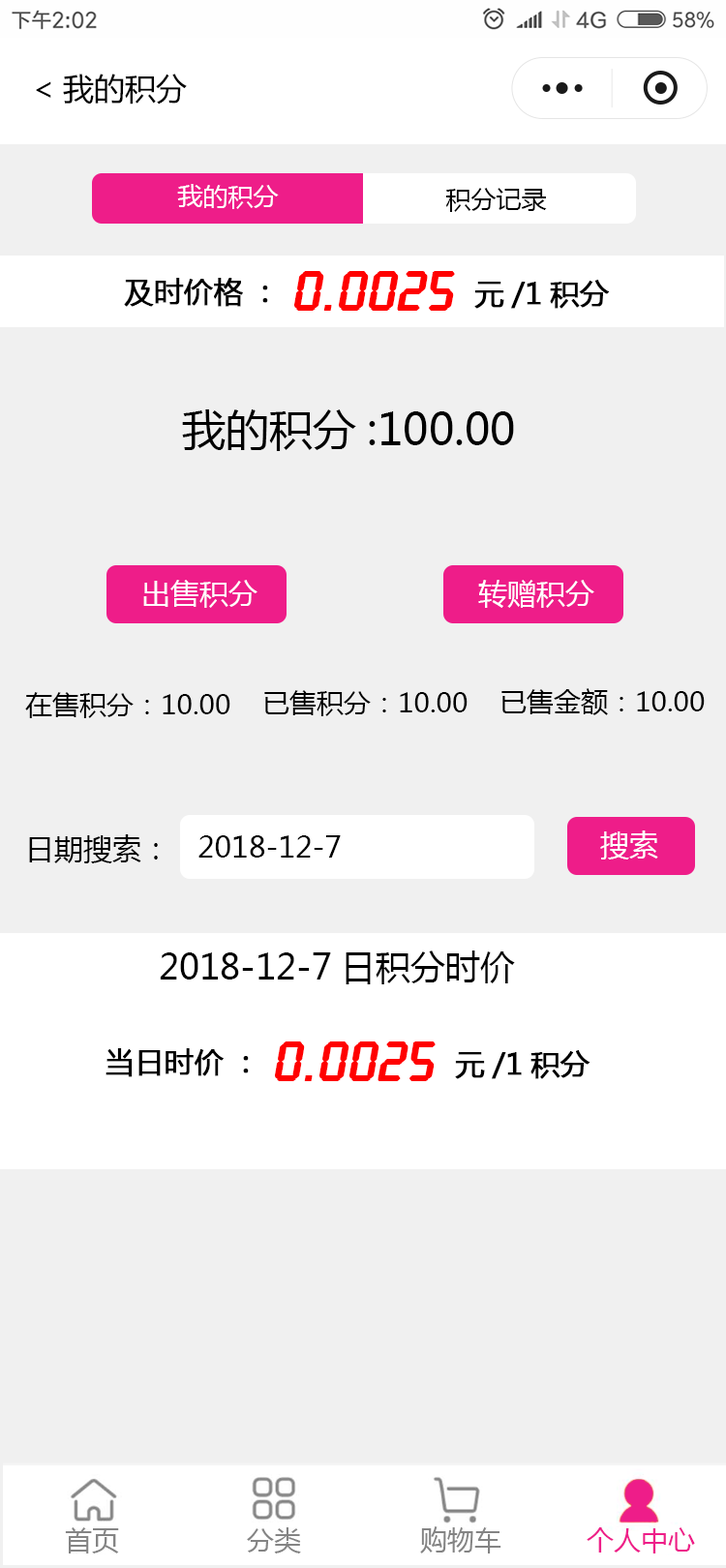
<style>
.page{position:relative;width:726px;height:1568px;background:#f0f0f0}
.page>*{position:absolute;margin:0}
.t1{font:31px "MicrosoftYaHei";color:#000000}
.t2{font:25.2px "MicrosoftYaHei";color:#ffffff}
.t3{font:25.2px "MicrosoftYaHei";color:#000000}
.t4{font:29px "MicrosoftYaHei";color:#000000;font-weight:bold}
.t5{font:58.1px "LcdD";color:#ff0101;font-weight:bold}
.t6{font:43.6px "MicrosoftYaHei";color:#000000}
.t7{font:29px "MicrosoftYaHei";color:#ffffff}
.t8{font:27.1px "MicrosoftYaHei";color:#000000}
.t9{font:29px "MicrosoftYaHei";color:#000000}
.t10{font:34.8px "MicrosoftYaHei";color:#000000}
</style>
<div class="page">
<p class="t1" style="left:36px;top:74px;width:151px;height:31px">&lt;我的积分</p>
<p class="t2" style="left:177px;top:184px;width:102px;height:25px">我的积分</p>
<p class="t3" style="left:446px;top:188px;width:101px;height:24px">积分记录</p>
<p class="t4" style="left:124px;top:278px;width:144px;height:29px">及时价格：</p>
<p class="t5" style="left:294px;top:271px;width:161px;height:40px">0.0025</p>
<p class="t4" style="left:474px;top:280px;width:136px;height:29px">元/1积分</p>
<p class="t6" style="left:182px;top:409px;width:332px;height:42px">我的积分:100.00</p>
<p class="t7" style="left:143px;top:580px;width:114px;height:28px">出售积分</p>
<p class="t7" style="left:478px;top:580px;width:116px;height:28px">转赠积分</p>
<p class="t8" style="left:501px;top:688px;width:204px;height:27px">已售金额：10.00</p>
<p class="t8" style="left:25px;top:692px;width:205px;height:26px">在售积分：10.00</p>
<p class="t8" style="left:264px;top:690px;width:203px;height:26px">已售积分：10.00</p>
<p class="t7" style="left:600px;top:830px;width:58px;height:29px">搜索</p>
<p class="t9" style="left:29px;top:834px;width:129px;height:29px">日期搜索：</p>
<p class="t9" style="left:198px;top:835px;width:143px;height:23px">2018-12-7</p>
<p class="t10" style="left:160px;top:950px;width:355px;height:34px">2018-12-7日积分时价</p>
<p class="t4" style="left:106px;top:1048px;width:143px;height:29px">当日时价：</p>
<p class="t5" style="left:275px;top:1041px;width:161px;height:40px">0.0025</p>
<p class="t4" style="left:455px;top:1050px;width:135px;height:29px">元/1积分</p>
</div>
